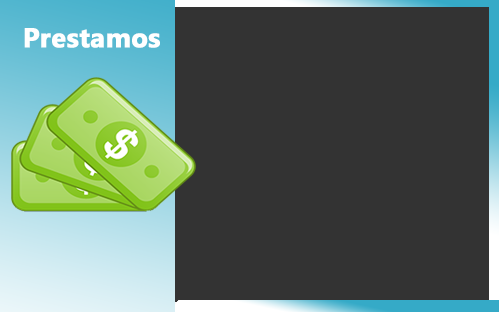
<style>
.page{position:relative;width:499px;height:312px;background:#333333}
.page>*{position:absolute;margin:0}
.t1{font:27px "SegoeUI-Bold";color:#ffffff;font-weight:bold}
</style>
<div class="page">
<p class="t1" style="left:24px;top:28px;width:136px;height:20px">Prestamos</p>
</div>
